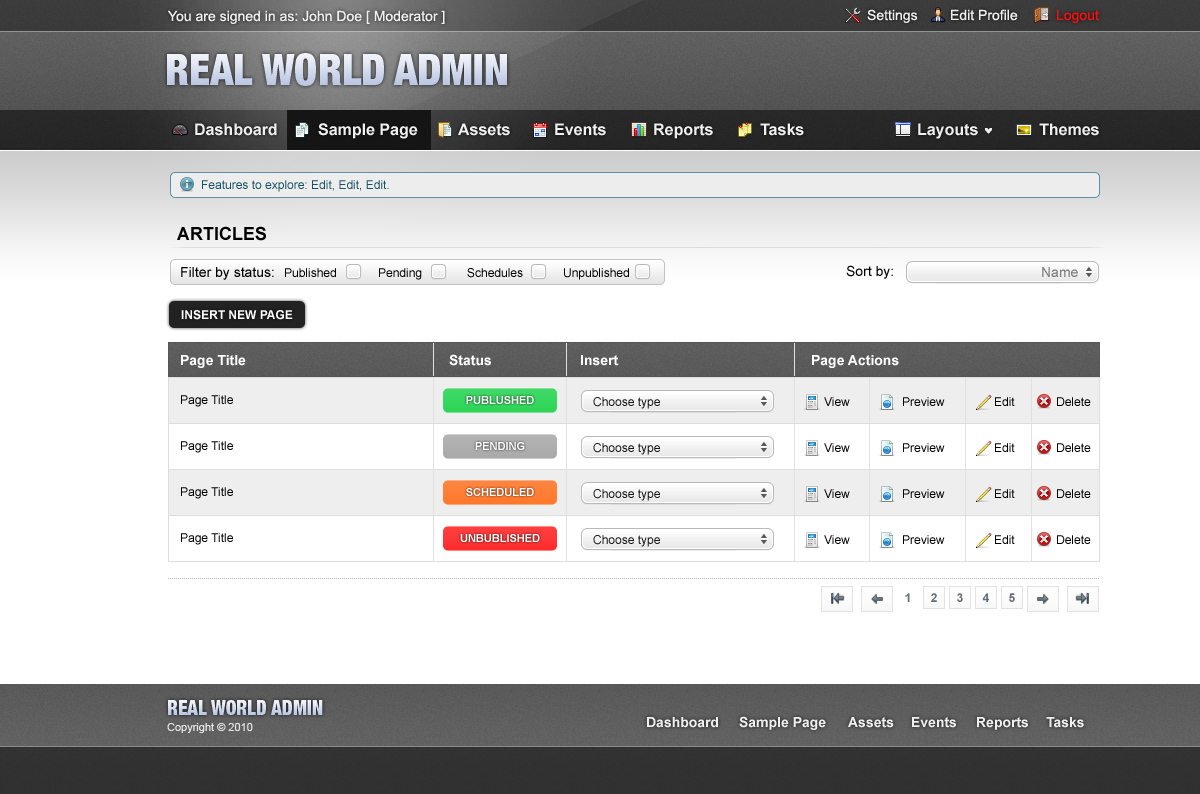
<style>
.page{position:relative;width:1200px;height:794px;background:#ffffff}
.page>*{position:absolute;margin:0}
.t1{font:14px "ArialMT";color:#efefef}
.t2{font:14px "ArialMT";color:#fa0f0f}
.t3{font:16px "Arial-BoldMT";color:#efefef}
.t4{font:12px "ArialMT";color:#165163}
.t5{font:18px "Arial-BoldMT";color:#000000;text-transform:uppercase}
.t6{font:14px "ArialMT";color:#000000}
.t7{font:12px "ArialMT";color:#000000}
.t8{font:14px "ArialMT";color:#797979}
.t9{font:12px "Arial-BoldMT";color:#ffffff;text-transform:uppercase}
.t10{font:14px "Arial-BoldMT";color:#ffffff}
.t11{font:11px "Arial-BoldMT";color:#ffffff;text-transform:uppercase}
.t12{font:12px "ArialMT";color:#161616}
.t13{font:12px "Arial-BoldMT";color:#646e77}
.t14{font:11px "ArialMT";color:#e5e5e5}
.t15{font:14px "Arial-BoldMT";color:#efefef}
</style>
<div class="page">
<p class="t1" style="left:168px;top:10px;width:277px;height:14px">You are signed in as: John Doe [ Moderator ]</p>
<p class="t1" style="left:867px;top:9px;width:51px;height:14px">Settings</p>
<p class="t1" style="left:951px;top:9px;width:67px;height:12px">Edit Profile</p>
<p class="t2" style="left:1057px;top:9px;width:42px;height:14px">Logout</p>
<p class="t3" style="left:195px;top:123px;width:82px;height:13px">Dashboard</p>
<p class="t3" style="left:318px;top:123px;width:100px;height:16px">Sample Page</p>
<p class="t3" style="left:458px;top:123px;width:52px;height:13px">Assets</p>
<p class="t3" style="left:555px;top:123px;width:51px;height:13px">Events</p>
<p class="t3" style="left:654px;top:123px;width:59px;height:16px">Reports</p>
<p class="t3" style="left:760px;top:123px;width:44px;height:13px">Tasks</p>
<p class="t3" style="left:918px;top:123px;width:60px;height:16px">Layouts</p>
<p class="t3" style="left:1039px;top:123px;width:60px;height:13px">Themes</p>
<p class="t4" style="left:202px;top:180px;width:187px;height:12px">Features to explore: Edit, Edit, Edit.</p>
<p class="t5" style="left:177px;top:226px;width:89px;height:15px">Articles</p>
<p class="t6" style="left:181px;top:267px;width:93px;height:13px">Filter by status:</p>
<p class="t7" style="left:285px;top:268px;width:51px;height:9px">Published</p>
<p class="t7" style="left:379px;top:268px;width:43px;height:12px">Pending</p>
<p class="t7" style="left:467px;top:268px;width:56px;height:10px">Schedules</p>
<p class="t7" style="left:564px;top:268px;width:65px;height:12px">Unpublished</p>
<p class="t6" style="left:846px;top:265px;width:47px;height:14px">Sort by:</p>
<p class="t8" style="left:1042px;top:267px;width:36px;height:10px">Name</p>
<p class="t9" style="left:181px;top:310px;width:112px;height:10px">Insert New Page</p>
<p class="t10" style="left:181px;top:355px;width:65px;height:13px">Page Title</p>
<p class="t10" style="left:449px;top:354px;width:42px;height:12px">Status</p>
<p class="t10" style="left:581px;top:355px;width:38px;height:11px">Insert</p>
<p class="t10" style="left:812px;top:355px;width:87px;height:13px">Page Actions</p>
<p class="t7" style="left:181px;top:395px;width:52px;height:12px">Page Title</p>
<p class="t11" style="left:466px;top:396px;width:68px;height:8px">Publushed</p>
<p class="t12" style="left:593px;top:397px;width:67px;height:12px">Choose type</p>
<p class="t7" style="left:824px;top:397px;width:26px;height:9px">View</p>
<p class="t7" style="left:903px;top:397px;width:42px;height:9px">Preview</p>
<p class="t7" style="left:995px;top:397px;width:20px;height:9px">Edit</p>
<p class="t7" style="left:1057px;top:397px;width:34px;height:9px">Delete</p>
<p class="t7" style="left:181px;top:441px;width:52px;height:12px">Page Title</p>
<p class="t11" style="left:475px;top:442px;width:50px;height:8px">Pending</p>
<p class="t12" style="left:593px;top:443px;width:67px;height:12px">Choose type</p>
<p class="t7" style="left:824px;top:443px;width:26px;height:9px">View</p>
<p class="t7" style="left:903px;top:443px;width:42px;height:9px">Preview</p>
<p class="t7" style="left:995px;top:443px;width:20px;height:9px">Edit</p>
<p class="t7" style="left:1057px;top:443px;width:34px;height:9px">Delete</p>
<p class="t7" style="left:181px;top:487px;width:52px;height:12px">Page Title</p>
<p class="t11" style="left:466px;top:488px;width:68px;height:8px">Scheduled</p>
<p class="t12" style="left:593px;top:489px;width:67px;height:12px">Choose type</p>
<p class="t7" style="left:824px;top:489px;width:26px;height:9px">View</p>
<p class="t7" style="left:903px;top:489px;width:42px;height:9px">Preview</p>
<p class="t7" style="left:995px;top:489px;width:20px;height:9px">Edit</p>
<p class="t7" style="left:1057px;top:489px;width:34px;height:9px">Delete</p>
<p class="t7" style="left:181px;top:533px;width:52px;height:12px">Page Title</p>
<p class="t11" style="left:460px;top:534px;width:80px;height:8px">Unbublished</p>
<p class="t12" style="left:593px;top:535px;width:67px;height:12px">Choose type</p>
<p class="t7" style="left:824px;top:535px;width:26px;height:9px">View</p>
<p class="t7" style="left:903px;top:535px;width:42px;height:9px">Preview</p>
<p class="t7" style="left:995px;top:535px;width:20px;height:9px">Edit</p>
<p class="t7" style="left:1057px;top:535px;width:34px;height:9px">Delete</p>
<p class="t13" style="left:905px;top:593px;width:5px;height:9px">1</p>
<p class="t13" style="left:931px;top:593px;width:6px;height:9px">2</p>
<p class="t13" style="left:957px;top:593px;width:6px;height:9px">3</p>
<p class="t13" style="left:982px;top:593px;width:7px;height:9px">4</p>
<p class="t13" style="left:1009px;top:593px;width:6px;height:9px">5</p>
<p class="t14" style="left:167px;top:723px;width:86px;height:10px">Copyright © 2010</p>
<p class="t15" style="left:647px;top:717px;width:71px;height:11px">Dashboard</p>
<p class="t15" style="left:739px;top:716px;width:87px;height:14px">Sample Page</p>
<p class="t15" style="left:848px;top:717px;width:46px;height:11px">Assets</p>
<p class="t15" style="left:912px;top:717px;width:44px;height:11px">Events</p>
<p class="t15" style="left:977px;top:717px;width:51px;height:13px">Reports</p>
<p class="t15" style="left:1046px;top:717px;width:38px;height:11px">Tasks</p>
</div>
